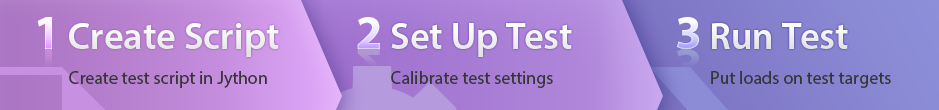
<style>
.page{position:relative;width:939px;height:110px}
.page>*{position:absolute;margin:0}
.t1{font:48px "MyriadPro-Bold"}
.t2{font:38px "MyriadPro-Semibold";color:#ffffff}
.t3{font:48px "MyriadPro-Bold";color:#c184d3}
.t4{font:48px "MyriadPro-Bold";color:#b098d3}
.t5{font:48px "MyriadPro-Bold";color:#8b8bd2}
.t6{font:18px "MyriadPro-Regular";color:#363636}
</style>
<div class="page">
<p class="t1" style="left:37px;top:17px;width:15px;height:32px">1</p>
<p class="t1" style="left:357px;top:17px;width:23px;height:32px">2</p>
<p class="t1" style="left:677px;top:17px;width:22px;height:32px">3</p>
<p class="t2" style="left:69px;top:23px;width:210px;height:34px">Create Script</p>
<p class="t2" style="left:391px;top:23px;width:181px;height:34px">Set Up Test</p>
<p class="t2" style="left:712px;top:23px;width:136px;height:26px">Run Test</p>
<p class="t3" style="left:37px;top:49px;width:15px;height:32px">1</p>
<p class="t4" style="left:357px;top:49px;width:23px;height:32px">2</p>
<p class="t5" style="left:677px;top:49px;width:22px;height:32px">3</p>
<p class="t6" style="left:69px;top:71px;width:198px;height:17px">Create test script in Jython</p>
<p class="t6" style="left:391px;top:71px;width:162px;height:17px">Calibrate test settings</p>
<p class="t6" style="left:711px;top:71px;width:180px;height:17px">Put loads on test targets</p>
</div>
